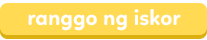
<style>
.page{position:relative;width:207px;height:40px;background:#ffda52}
.page>*{position:absolute;margin:0}
.t1{font:22px "Linotte-Bold";color:#ffffff}
</style>
<div class="page">
<p class="t1" style="left:28px;top:9px;width:153px;height:22px">ranggo ng iskor</p>
</div>
